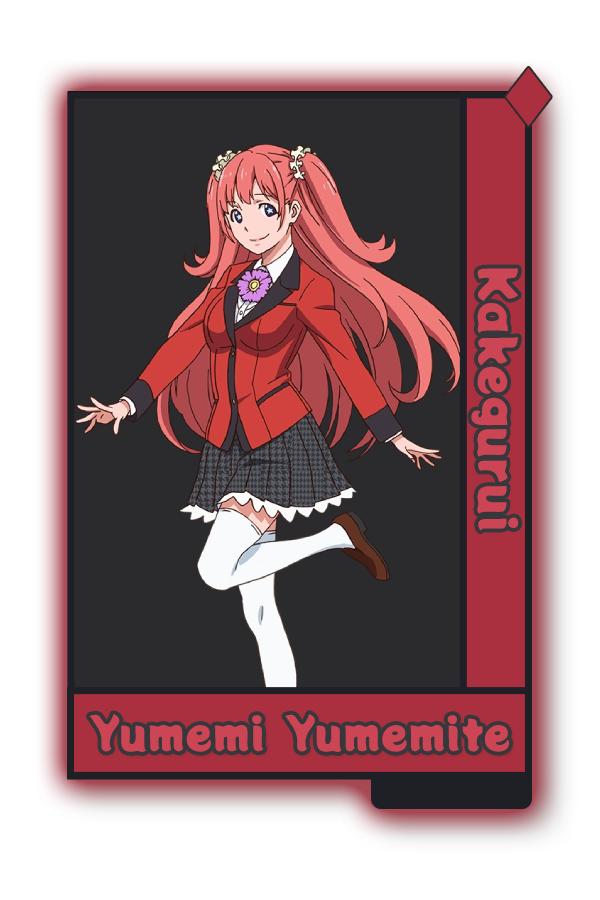
<style>
.page{position:relative;width:600px;height:900px;background:#2b2a2d}
.page>*{position:absolute;margin:0}
.t1{font:80px "DejaVuSans";color:#ab303f}
.t2{font:50px "PottaOne-Regular";color:#cb4554}
.t3{font:45px "PottaOne-Regular";color:#cb4554}
</style>
<div class="page">
<p class="t1" style="left:506px;top:67px;width:45px;height:59px">♦️</p>
<p class="t2" style="left:471px;top:268px;width:48px;height:263px;rotate:90deg">Kakegurui</p>
<p class="t3" style="left:89px;top:713px;width:421px;height:40px">Yumemi Yumemite</p>
</div>
